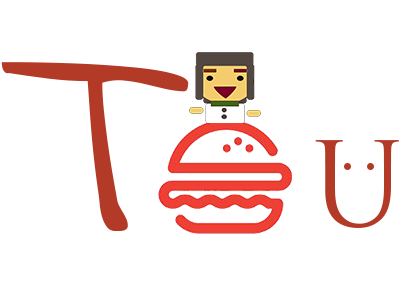
<style>
.page{position:relative;width:400px;height:300px;background:#ffffff}
.page>*{position:absolute;margin:0}
.t1{font:276.3px "IndieFlower";color:#b33a27}
.t2{font:114.2px "TrajanPro3-Regular";color:#b33a27}
</style>
<div class="page">
<p class="t1" style="left:1px;top:62px;width:188px;height:169px">T</p>
<p class="t2" style="left:315px;top:140px;width:85px;height:88px">U</p>
</div>
